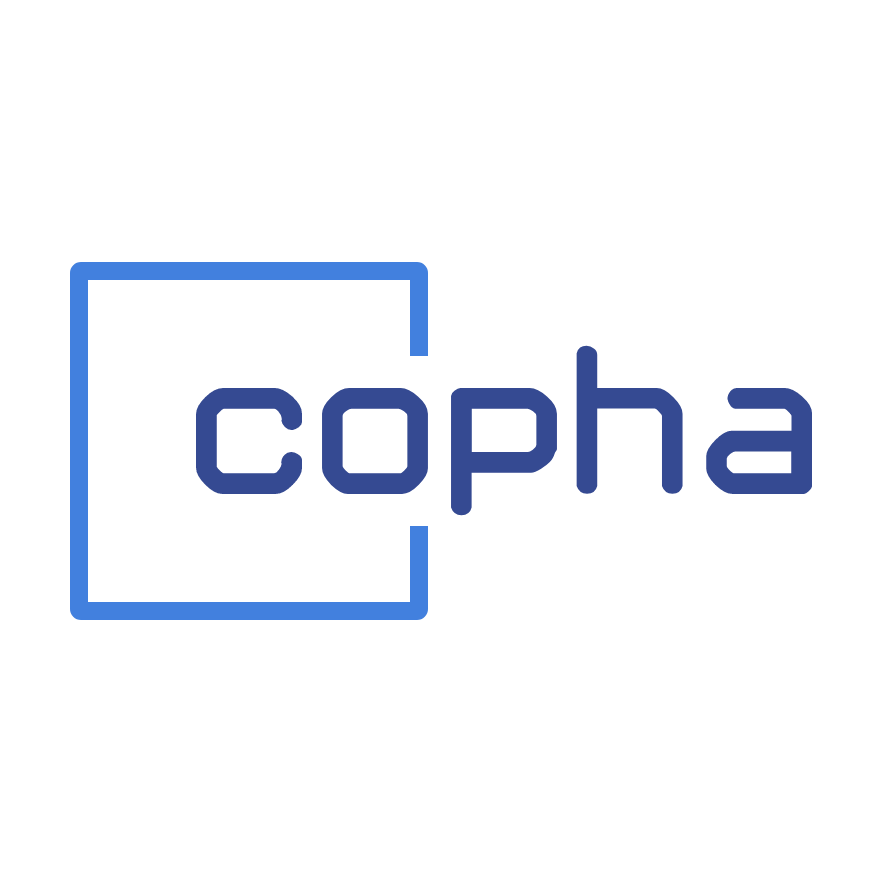
<style>
.page{position:relative;width:883px;height:883px;background:#ffffff}
.page>*{position:absolute;margin:0}
.t1{font:170px "Obliviousfont";letter-spacing:0.06em;color:#354a92}
</style>
<div class="page">
<p class="t1" style="left:196px;top:345px;width:617px;height:171px">copha</p>
</div>
